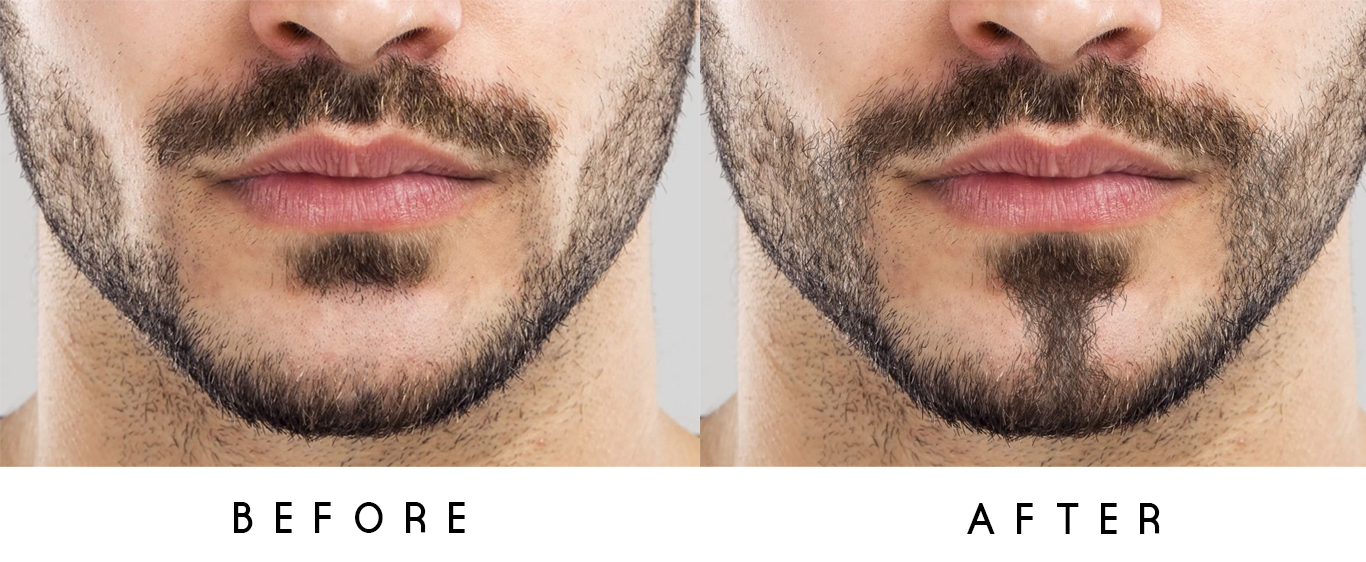
<style>
.page{position:relative;width:1366px;height:562px}
.page>*{position:absolute;margin:0}
.t1{font:36px "EuropeUnderground";letter-spacing:0.64em;color:#000000;scale:0.97 1}
</style>
<div class="page">
<p class="t1" style="left:234px;top:502px;width:231px;height:31px">BEFORE</p>
<p class="t1" style="left:967px;top:503px;width:193px;height:31px">AFTER</p>
</div>
